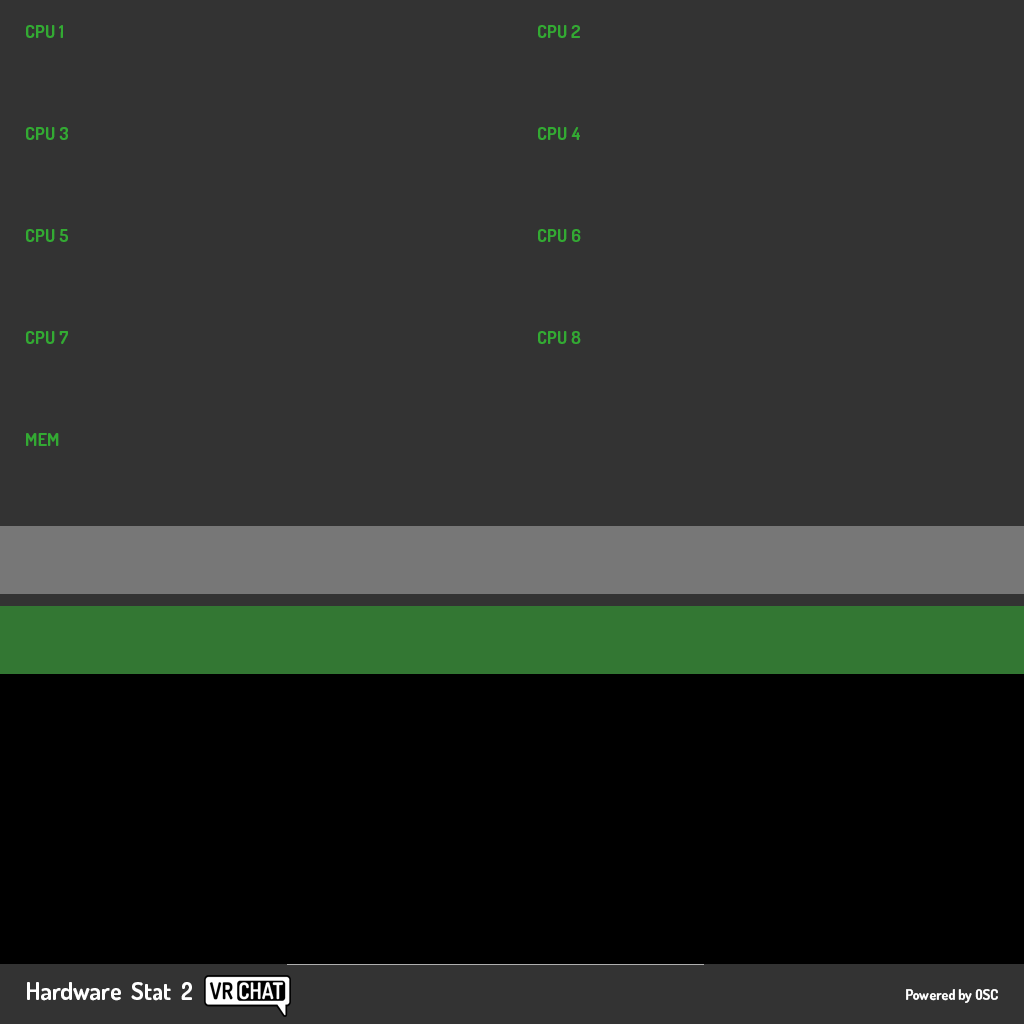
<style>
.page{position:relative;width:1024px;height:1024px;background:#333333}
.page>*{position:absolute;margin:0}
.t1{font:18px "Dosis-Bold";color:#33aa33}
.t2{font:24px "Dosis-Bold";color:#ffffff}
.t3{font:14px "Dosis-Bold";color:#ffffff}
</style>
<div class="page">
<p class="t1" style="left:26px;top:25px;width:37px;height:13px">CPU 1</p>
<p class="t1" style="left:538px;top:25px;width:42px;height:13px">CPU 2</p>
<p class="t1" style="left:26px;top:127px;width:42px;height:13px">CPU 3</p>
<p class="t1" style="left:538px;top:127px;width:42px;height:13px">CPU 4</p>
<p class="t1" style="left:26px;top:229px;width:42px;height:13px">CPU 5</p>
<p class="t1" style="left:538px;top:229px;width:43px;height:13px">CPU 6</p>
<p class="t1" style="left:26px;top:331px;width:42px;height:13px">CPU 7</p>
<p class="t1" style="left:538px;top:331px;width:43px;height:13px">CPU 8</p>
<p class="t1" style="left:26px;top:433px;width:33px;height:13px">MEM</p>
<p class="t2" style="left:27px;top:982px;width:165px;height:19px">Hardware  Stat  2</p>
<p class="t3" style="left:906px;top:989px;width:92px;height:14px">Powered by OSC</p>
</div>
